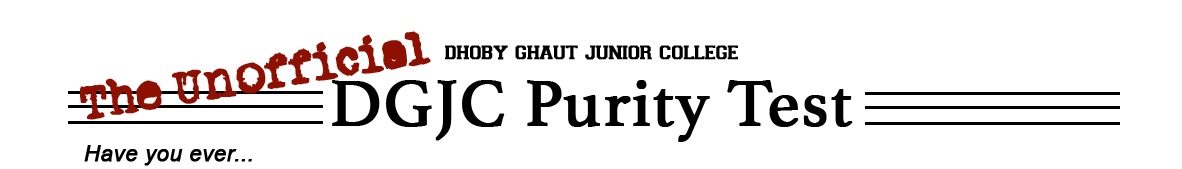
<style>
.page{position:relative;width:1182px;height:169px;background:#ffffff}
.page>*{position:absolute;margin:0}
.t1{font:39.6px "Oldtypewriter";letter-spacing:0.01em;color:#8e1003;font-weight:bold}
.t2{font:21.7px "Varsity-Regular";letter-spacing:0.01em;color:#000000;font-weight:bold}
.t3{font:68px "Athelas-Regular";letter-spacing:0.01em;color:#000000;font-weight:bold}
.t4{font:21.7px "Arial-ItalicMT";letter-spacing:0.01em;color:#000000;font-weight:bold}
</style>
<div class="page">
<p class="t1" style="left:80px;top:31px;width:351px;height:89px;rotate:-10deg">The Unofficial</p>
<p class="t2" style="left:445px;top:45px;width:293px;height:15px">dhoby ghaut junior college</p>
<p class="t3" style="left:332px;top:80px;width:521px;height:62px">DGJC Purity Test</p>
<p class="t4" style="left:84px;top:145px;width:168px;height:21px">Have you ever...</p>
</div>
